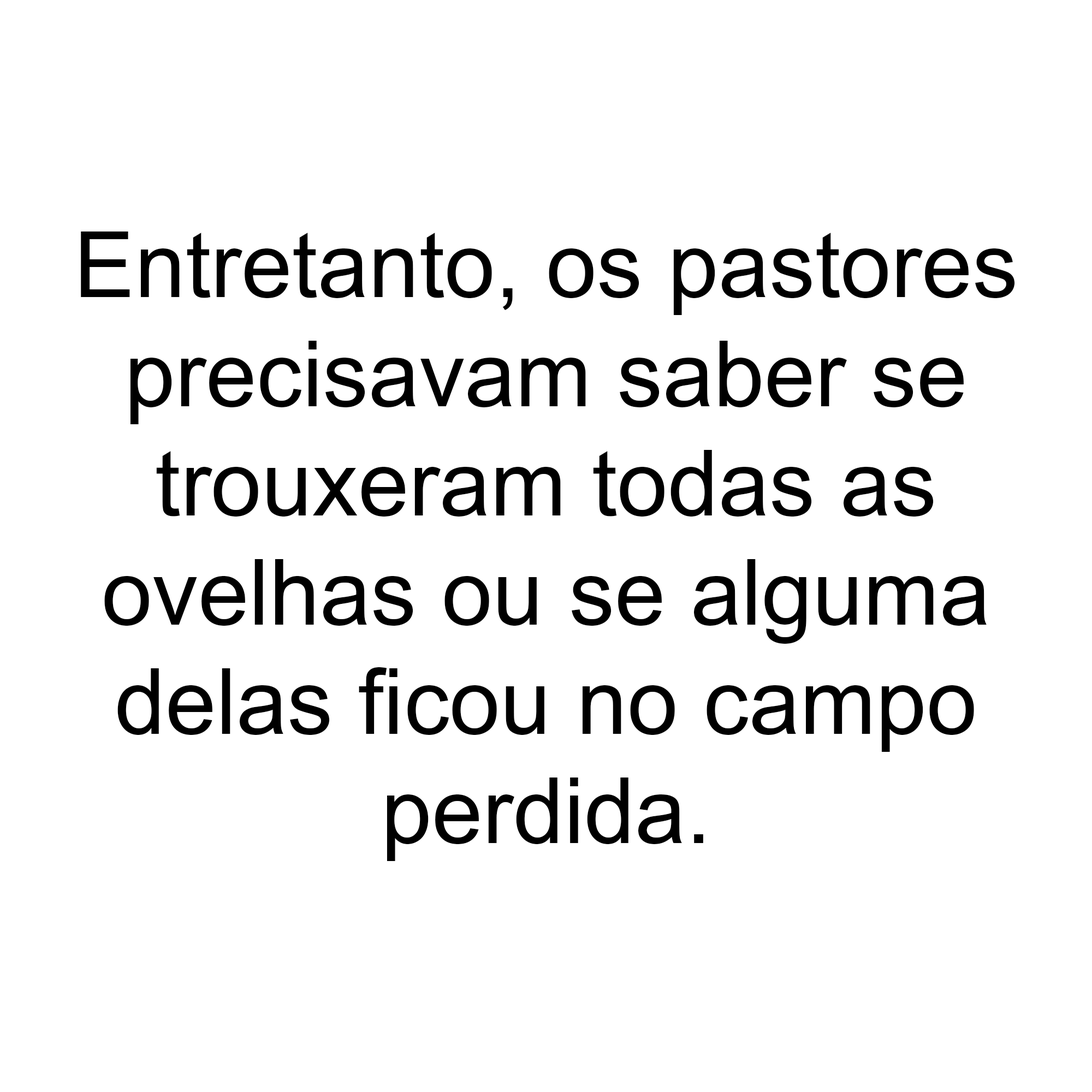
<style>
.page{position:relative;width:1092px;height:1092px;background:#ffffff}
.page>*{position:absolute;margin:0}
.t1{font:91px "ArialMT";color:#000000}
</style>
<div class="page">
<p class="t1" style="left:81px;top:232px;width:934px;height:629px;text-align:center">Entretanto, os pastores<br>precisavam saber se<br>trouxeram todas as<br>ovelhas ou se alguma<br>delas ficou no campo<br>perdida.</p>
</div>
